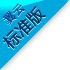
<style>
.page{position:relative;width:70px;height:70px;background:#ffffff}
.page>*{position:absolute;margin:0}
.t1{font:16.5px "FZLTHK--GBK1-0";letter-spacing:-0.025em;color:#013165;font-weight:bold}
.t2{font:11.9px "STZhongsong";letter-spacing:-0.025em;color:#00499a;font-weight:bold}
</style>
<div class="page">
<p class="t1" style="left:2px;top:6px;width:44px;height:43px;rotate:-45deg">标准版</p>
<p class="t2" style="left:2px;top:3px;width:23px;height:22px;rotate:-45deg">翼云</p>
</div>
